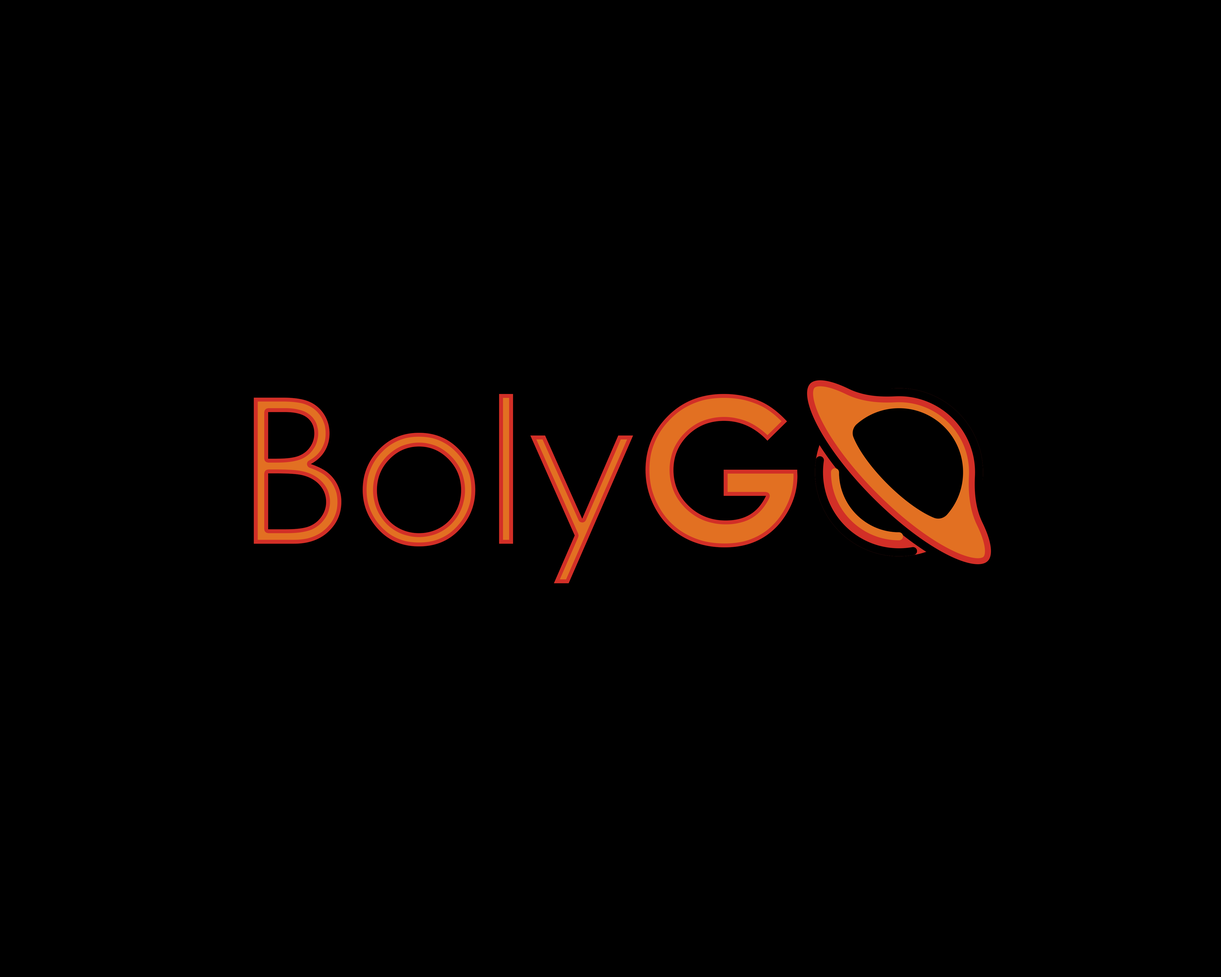
<style>
.page{position:relative;width:1221px;height:977px;background:#000000}
.page>*{position:absolute;margin:0}
.t1{font:203.5px "CenturyGothic"}
.t2{font:203.5px "CenturyGothic-Bold"}
</style>
<div class="page">
<p class="t1" style="left:254px;top:394px;width:714px;height:189px">Boly<span class="t2">GO</span></p>
</div>
